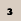
<style>
.page{position:relative;width:21px;height:21px;background:#d9cdc1}
.page>*{position:absolute;margin:0}
.t1{font:9px "Tahoma-Bold";color:#000000}
</style>
<div class="page">
<p class="t1" style="left:7px;top:8px;width:6px;height:7px">3</p>
</div>
